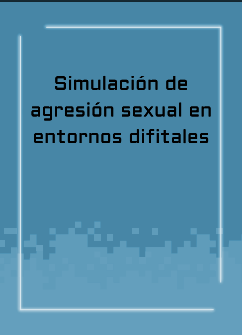
<style>
.page{position:relative;width:242px;height:335px;background:#4786a6}
.page>*{position:absolute;margin:0}
.t1{font:19.2px/26.7px "Aldrich-Regular";letter-spacing:0.005em;color:#000000}
</style>
<div class="page">
<p class="t1" style="left:31px;top:75px;width:180px;height:69px;text-align:center">Simulación de <br>agresión sexual en <br>entornos difitales</p>
</div>
